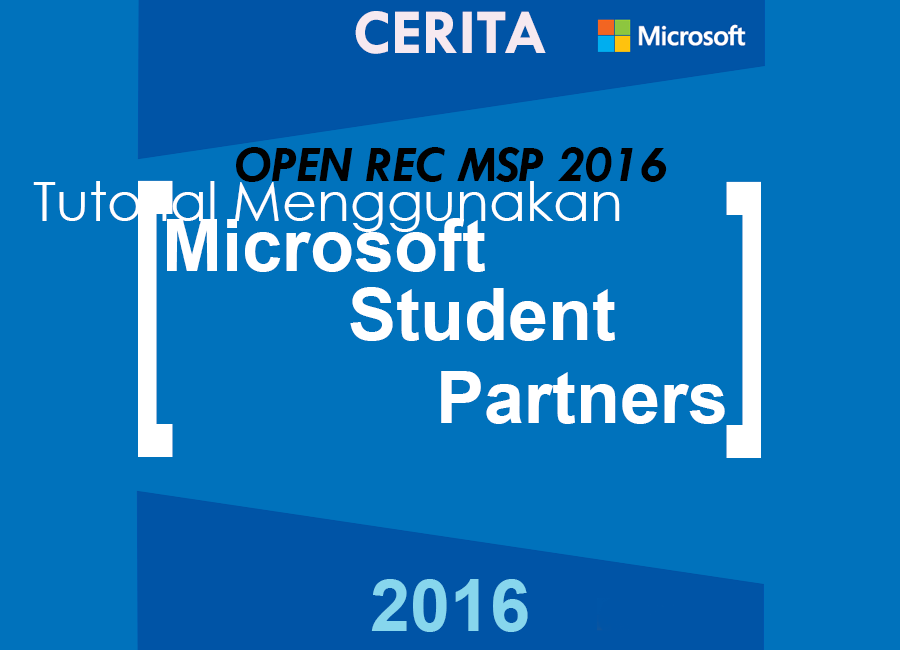
<style>
.page{position:relative;width:900px;height:650px;background:#0072bc}
.page>*{position:absolute;margin:0}
.t1{font:64.6px "TwCenMT-Bold";color:#f6e9f0}
.t2{font:51.3px "TwCenMT-BoldItalic";color:#000000}
.t3{font:54px "CenturyGothic";color:#ffffff}
.t4{font:301.6px "Arial-BoldMT";color:#ffffff;scale:0.47 1}
.t5{font:72.2px "Arial-BoldMT";color:#ffffff}
.t6{font:72px "Arial-BoldMT";color:#87d6ed}
</style>
<div class="page">
<p class="t1" style="left:355px;top:11px;width:191px;height:43px">CERITA</p>
<p class="t2" style="left:236px;top:147px;width:431px;height:35px">OPEN REC MSP 2016</p>
<p class="t3" style="left:33px;top:181px;width:587px;height:51px">Tutorial Menggunakan</p>
<p class="t4" style="left:138px;top:180px;width:35px;height:277px">[</p>
<p class="t4" style="left:726px;top:181px;width:35px;height:277px;rotate:180deg">[</p>
<p class="t5" style="left:167px;top:218px;width:318px;height:54px">Microsoft</p>
<p class="t5" style="left:350px;top:287px;width:265px;height:54px">Student</p>
<p class="t5" style="left:441px;top:371px;width:284px;height:53px">Partners</p>
<p class="t6" style="left:371px;top:579px;width:157px;height:53px">2016</p>
</div>
